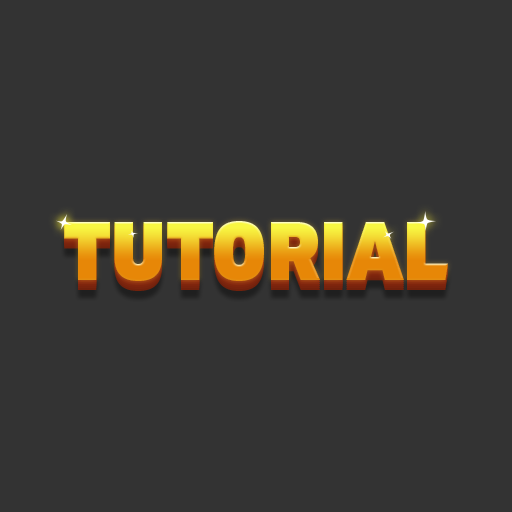
<style>
.page{position:relative;width:512px;height:512px;background:#333333}
.page>*{position:absolute;margin:0}
.t1{font:83.3px "Gilam-BlackDEMO";letter-spacing:-0.005em;text-transform:uppercase;scale:0.95 1}
</style>
<div class="page">
<p class="t1" style="left:64px;top:221px;width:384px;height:60px">tutorial</p>
</div>
